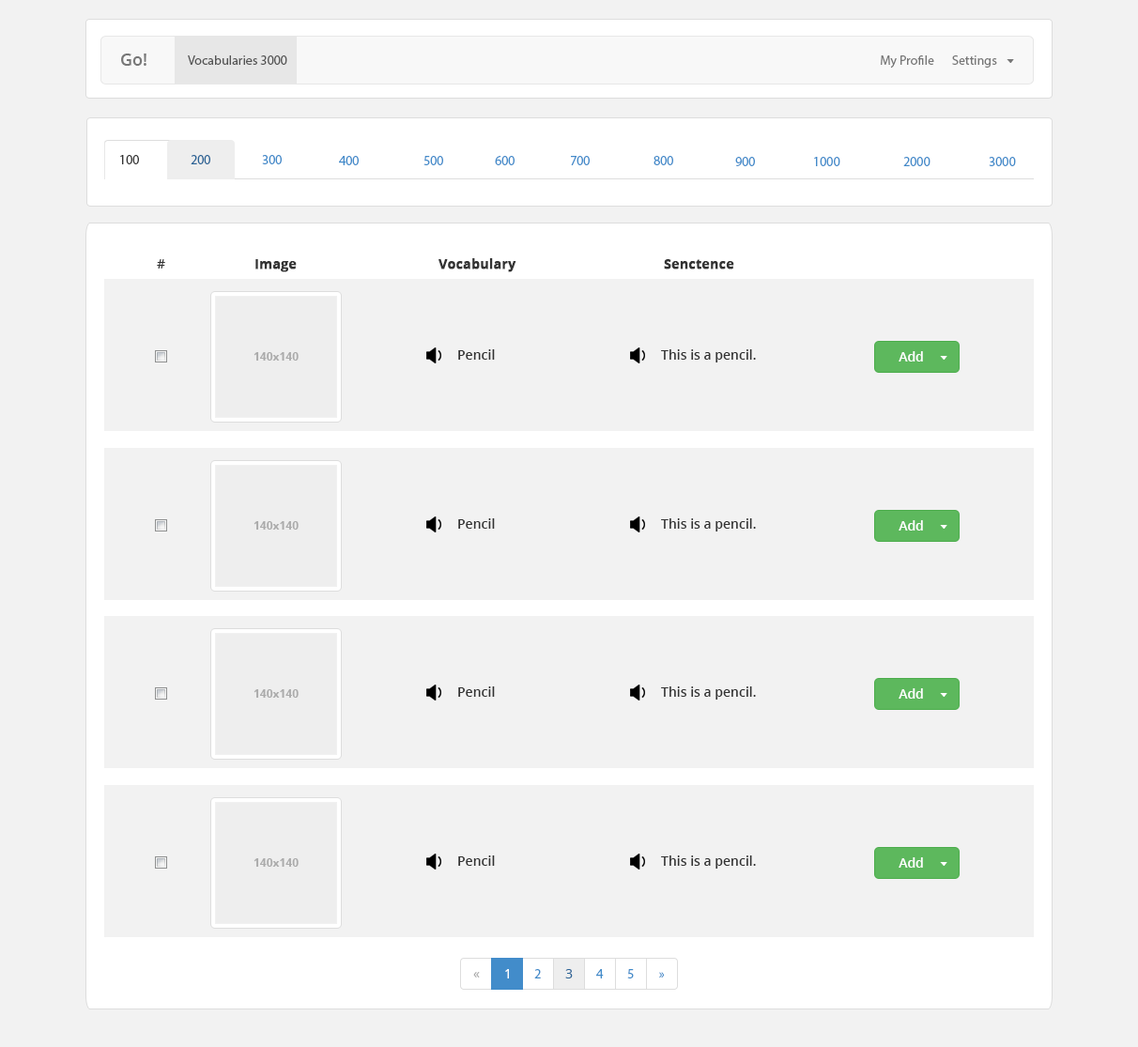
<style>
.page{position:relative;width:1138px;height:1047px;background:#f2f2f2}
.page>*{position:absolute;margin:0}
.t1{font:16.9px "OpenSans-Semibold";color:#777777}
.t2{font:13.2px "OpenSans";color:#555555}
.t3{font:13.2px "OpenSans";color:#777777}
.t4{font:13.2px "OpenSans";color:#333333}
.t5{font:13.2px "OpenSans";color:#2a6496}
.t6{font:13.2px "OpenSans";color:#428bca}
.t7{font:13.2px "OpenSans-Semibold";color:#333333}
.t8{font:13.2px "OpenSans-Bold";color:#333333;font-weight:bold}
.t9{font:11.3px "OpenSans-Bold";color:#ababab}
.t10{font:13.2px "OpenSans-Semibold";color:#ffffff}
.t11{font:13.2px "OpenSans";color:#ababab}
.t12{font:13.2px "OpenSans";color:#ffffff}
.t13{font:13.2px "OpenSans";color:#428cca}
.t14{font:13.2px "OpenSans";color:#2e6595}
</style>
<div class="page">
<p class="t1" style="left:121px;top:54px;width:26px;height:12px">Go!</p>
<p class="t2" style="left:188px;top:55px;width:99px;height:10px">Vocabularies 3000</p>
<p class="t3" style="left:881px;top:55px;width:54px;height:14px">My Profile</p>
<p class="t3" style="left:953px;top:55px;width:45px;height:13px">Settings</p>
<p class="t4" style="left:120px;top:155px;width:19px;height:9px">100</p>
<p class="t5" style="left:191px;top:155px;width:19px;height:9px">200</p>
<p class="t6" style="left:262px;top:155px;width:20px;height:9px">300</p>
<p class="t6" style="left:339px;top:156px;width:20px;height:9px">400</p>
<p class="t6" style="left:424px;top:156px;width:19px;height:9px">500</p>
<p class="t6" style="left:495px;top:156px;width:20px;height:9px">600</p>
<p class="t6" style="left:571px;top:156px;width:19px;height:9px">700</p>
<p class="t6" style="left:654px;top:156px;width:20px;height:9px">800</p>
<p class="t6" style="left:736px;top:157px;width:19px;height:9px">900</p>
<p class="t6" style="left:814px;top:157px;width:27px;height:9px">1000</p>
<p class="t6" style="left:904px;top:157px;width:27px;height:9px">2000</p>
<p class="t6" style="left:989px;top:157px;width:27px;height:9px">3000</p>
<p class="t7" style="left:157px;top:259px;width:8px;height:10px">#</p>
<p class="t8" style="left:256px;top:259px;width:41px;height:13px">Image</p>
<p class="t8" style="left:439px;top:258px;width:78px;height:14px">Vocabulary</p>
<p class="t8" style="left:664px;top:259px;width:71px;height:11px">Senctence</p>
<p class="t9" style="left:254px;top:352px;width:45px;height:9px">140x140</p>
<p class="t7" style="left:458px;top:349px;width:37px;height:11px">Pencil</p>
<p class="t7" style="left:661px;top:349px;width:95px;height:14px">This is a pencil.</p>
<p class="t10" style="left:899px;top:351px;width:24px;height:11px">Add</p>
<p class="t9" style="left:254px;top:521px;width:45px;height:9px">140x140</p>
<p class="t7" style="left:458px;top:519px;width:37px;height:10px">Pencil</p>
<p class="t7" style="left:661px;top:519px;width:95px;height:13px">This is a pencil.</p>
<p class="t10" style="left:899px;top:520px;width:24px;height:11px">Add</p>
<p class="t9" style="left:254px;top:689px;width:45px;height:9px">140x140</p>
<p class="t7" style="left:458px;top:687px;width:37px;height:10px">Pencil</p>
<p class="t7" style="left:661px;top:687px;width:95px;height:13px">This is a pencil.</p>
<p class="t10" style="left:899px;top:689px;width:24px;height:10px">Add</p>
<p class="t7" style="left:458px;top:856px;width:37px;height:10px">Pencil</p>
<p class="t7" style="left:661px;top:856px;width:95px;height:13px">This is a pencil.</p>
<p class="t10" style="left:899px;top:858px;width:24px;height:10px">Add</p>
<p class="t9" style="left:254px;top:859px;width:45px;height:8px">140x140</p>
<p class="t11" style="left:473px;top:972px;width:7px;height:6px">«</p>
<p class="t12" style="left:505px;top:969px;width:4px;height:10px">1</p>
<p class="t13" style="left:534px;top:969px;width:7px;height:10px">2</p>
<p class="t14" style="left:565px;top:969px;width:8px;height:10px">3</p>
<p class="t13" style="left:596px;top:969px;width:8px;height:10px">4</p>
<p class="t13" style="left:627px;top:969px;width:7px;height:10px">5</p>
<p class="t13" style="left:659px;top:972px;width:6px;height:6px">»</p>
</div>
